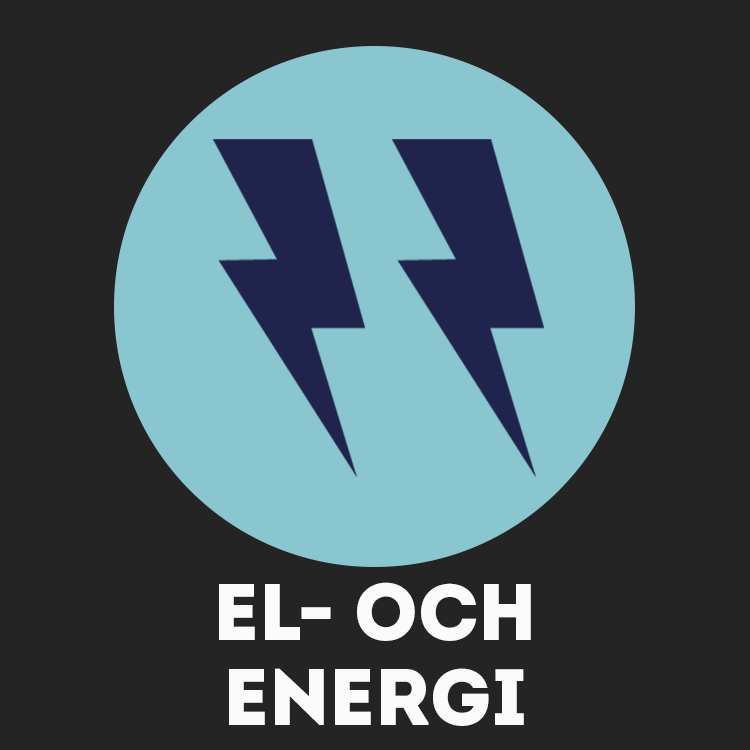
<style>
.page{position:relative;width:750px;height:750px;background:#242424}
.page>*{position:absolute;margin:0}
.t1{font:80px/85px "Intro-Black";color:#fbfbfb}
</style>
<div class="page">
<p class="t1" style="left:219px;top:582px;width:312px;height:144px;text-align:center">EL- OCH<br>ENERGI</p>
</div>
